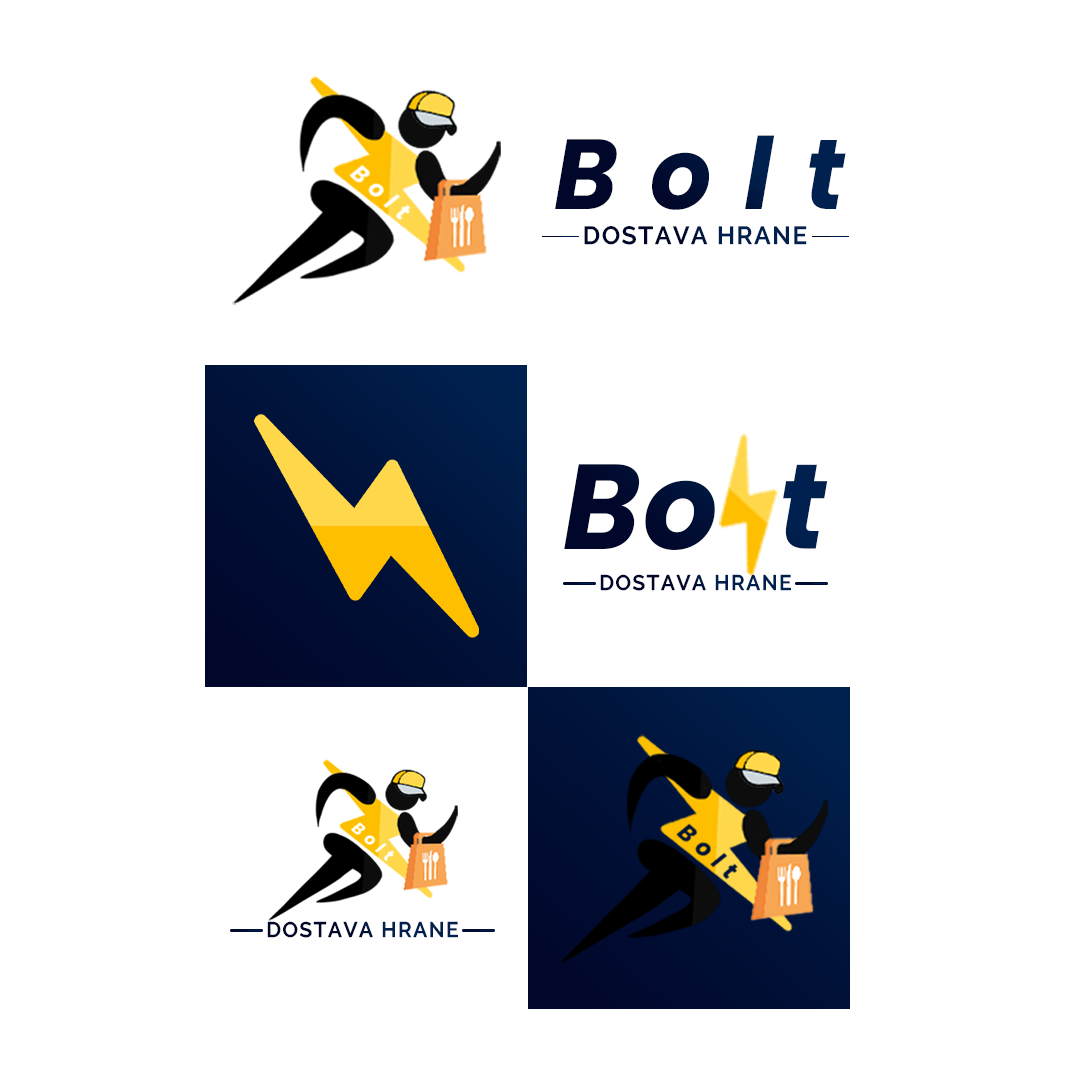
<style>
.page{position:relative;width:1080px;height:1080px;background:#ffffff}
.page>*{position:absolute;margin:0}
.t1{font:99.4px "Poppins-BoldItalic";letter-spacing:0.34em}
.t2{font:24.6px "RalewayRoman-SemiBold";letter-spacing:0.08em;color:#00143d;text-transform:uppercase;scale:0.97 1}
.t3{font:120.7px "Poppins-BoldItalic";letter-spacing:0.08em;color:#010b30}
.t4{font:120.7px "Poppins-BoldItalic";letter-spacing:0.08em;color:#010b30;text-transform:uppercase}
.t5{font:21.1px "RalewayRoman-SemiBold";letter-spacing:0.08em;color:#00133c;text-transform:uppercase}
</style>
<div class="page">
<p class="t1" style="left:555px;top:135px;width:291px;height:75px">Bolt</p>
<p class="t2" style="left:584px;top:226px;width:223px;height:19px">Dostava hrane</p>
<p class="t3" style="left:564px;top:464px;width:264px;height:86px"><span class="t4">B</span>ot</p>
<p class="t5" style="left:600px;top:574px;width:191px;height:17px">Dostava hrane</p>
<p class="t5" style="left:267px;top:921px;width:191px;height:17px">Dostava hrane</p>
</div>
